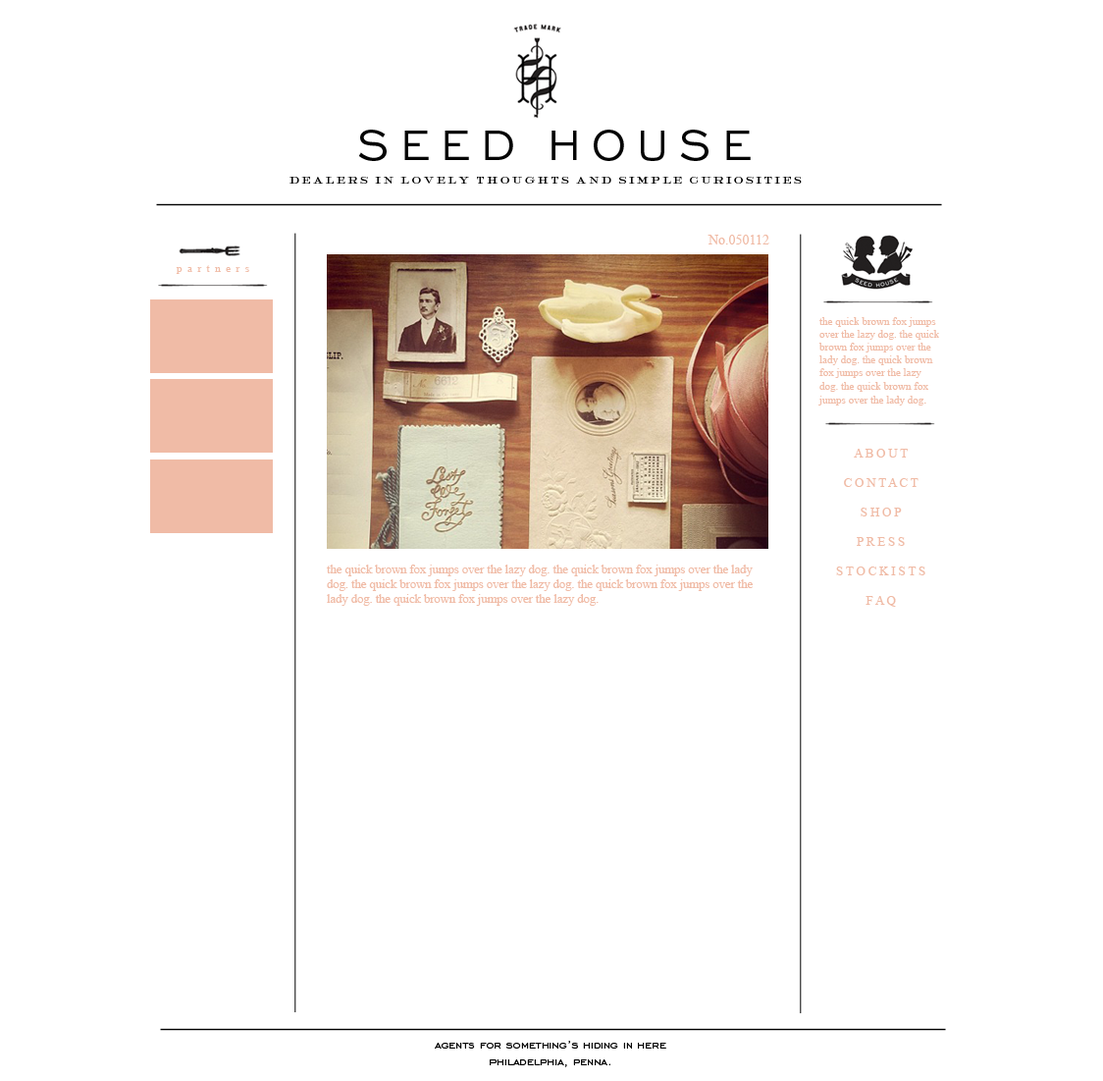
<style>
.page{position:relative;width:1103px;height:1081px;background:#ffffff}
.page>*{position:absolute;margin:0}
.t1{font:13.7px "TimesNewRomanPSMT";color:#f0bba6}
.t2{font:10.8px "TimesNewRomanPSMT";color:#f0bba6}
.t3{font:11.8px "TimesNewRomanPSMT";color:#f0bba6}
.t4{font:12.3px "TimesNewRomanPSMT";color:#f0bba6}
.t5{font:13.7px "EngraversGothicBT-Regular";color:#050505}
</style>
<div class="page">
<p class="t1" style="left:708px;top:235px;width:62px;height:9px">No.050112</p>
<p class="t2" style="left:176px;top:265px;width:73px;height:9px">p  a  r  t  n  e  r  s</p>
<p class="t2" style="left:819px;top:317px;width:120px;height:88px">the quick brown fox jumps over the lazy dog. the quick brown fox jumps over the lady dog. the quick brown fox jumps over the lazy dog. the quick brown fox jumps over the lady dog<span class="t3">.</span></p>
<p class="t4" style="left:836px;top:449px;width:90px;height:158px;text-align:center">A B O U T<br><br>C O N T A C T<br><br>S H O P<br><br>P R E S S<br><br>S T O C K I S T S<br><br>F A Q</p>
<p class="t4" style="left:326px;top:564px;width:427px;height:42px">the quick brown fox jumps over the lazy dog. the quick brown fox jumps over the lady dog. the quick brown fox jumps over the lazy dog. the quick brown fox jumps over the lady dog. the quick brown fox jumps over the lazy dog.</p>
<p class="t5" style="left:435px;top:1041px;width:232px;height:26px;text-align:center">agents for something’s hiding in here<br>philadelphia, penna.</p>
</div>
